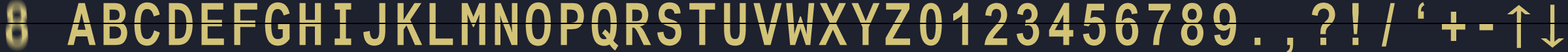
<style>
.page{position:relative;width:1568px;height:52px;background:#1e212e}
.page>*{position:absolute;margin:0}
.t1{font:58.8px "ArialMonoMTPro-Bold";color:#d2c378;scale:0.8 1}
.t2{font:78.4px "AppleSymbols";color:#d2c378}
</style>
<div class="page">
<p class="t1" style="left:67px;top:3px;width:29px;height:43px">A</p>
<p class="t1" style="left:103px;top:3px;width:24px;height:43px">B</p>
<p class="t1" style="left:134px;top:2px;width:26px;height:44px">C</p>
<p class="t1" style="left:169px;top:3px;width:24px;height:43px">D</p>
<p class="t1" style="left:201px;top:3px;width:23px;height:43px">E</p>
<p class="t1" style="left:234px;top:3px;width:23px;height:43px">F</p>
<p class="t1" style="left:265px;top:2px;width:25px;height:44px">G</p>
<p class="t1" style="left:299px;top:3px;width:22px;height:43px">H</p>
<p class="t1" style="left:335px;top:3px;width:16px;height:43px">I</p>
<p class="t1" style="left:363px;top:3px;width:22px;height:43px">J</p>
<p class="t1" style="left:397px;top:3px;width:25px;height:43px">K</p>
<p class="t1" style="left:429px;top:3px;width:24px;height:43px">L</p>
<p class="t1" style="left:461px;top:3px;width:24px;height:43px">M</p>
<p class="t1" style="left:495px;top:3px;width:22px;height:43px">N</p>
<p class="t1" style="left:525px;top:2px;width:26px;height:44px">O</p>
<p class="t1" style="left:561px;top:3px;width:23px;height:43px">P</p>
<p class="t1" style="left:591px;top:2px;width:28px;height:49px">Q</p>
<p class="t1" style="left:626px;top:3px;width:25px;height:43px">R</p>
<p class="t1" style="left:657px;top:2px;width:24px;height:44px">S</p>
<p class="t1" style="left:689px;top:3px;width:26px;height:43px">T</p>
<p class="t1" style="left:724px;top:3px;width:22px;height:43px">U</p>
<p class="t1" style="left:753px;top:3px;width:29px;height:43px">V</p>
<p class="t1" style="left:786px;top:3px;width:29px;height:43px">W</p>
<p class="t1" style="left:819px;top:3px;width:28px;height:43px">X</p>
<p class="t1" style="left:851px;top:3px;width:29px;height:43px">Y</p>
<p class="t1" style="left:885px;top:3px;width:25px;height:43px">Z</p>
<p class="t1" style="left:920px;top:3px;width:22px;height:43px">0</p>
<p class="t1" style="left:953px;top:3px;width:15px;height:43px">1</p>
<p class="t1" style="left:985px;top:3px;width:22px;height:43px">2</p>
<p class="t1" style="left:1017px;top:3px;width:22px;height:43px">3</p>
<p class="t1" style="left:1049px;top:3px;width:24px;height:43px">4</p>
<p class="t1" style="left:1083px;top:3px;width:23px;height:43px">5</p>
<p class="t1" style="left:1115px;top:3px;width:24px;height:43px">6</p>
<p class="t1" style="left:1149px;top:3px;width:22px;height:43px">7</p>
<p class="t1" style="left:1181px;top:3px;width:22px;height:43px">8</p>
<p class="t1" style="left:1213px;top:3px;width:23px;height:43px">9</p>
<p class="t1" style="left:1312px;top:3px;width:23px;height:43px">?</p>
<p class="t1" style="left:1352px;top:3px;width:7px;height:43px">!</p>
<p class="t1" style="left:1381px;top:3px;width:14px;height:44px">/</p>
<p class="t1" style="left:1418px;top:2px;width:7px;height:17px">‘</p>
<p class="t2" style="left:1507px;top:5px;width:24px;height:43px">↑</p>
<p class="t2" style="left:1541px;top:5px;width:23px;height:43px;rotate:180deg">↑</p>
<p class="t1" style="left:1442px;top:12px;width:23px;height:29px">+</p>
<p class="t1" style="left:1479px;top:23px;width:15px;height:8px">-</p>
<p class="t1" style="left:1254px;top:38px;width:7px;height:8px">.</p>
</div>
